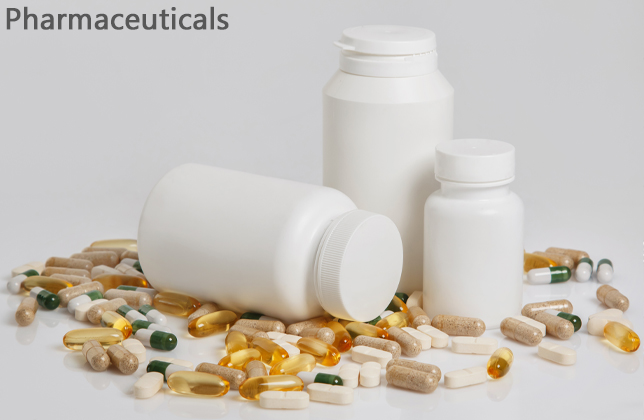
<style>
.page{position:relative;width:644px;height:420px}
.page>*{position:absolute;margin:0}
.t1{font:30px "Gadugi";color:#575757;font-weight:bold}
</style>
<div class="page">
<p class="t1" style="left:6px;top:6px;width:223px;height:24px">Pharmaceuticals</p>
</div>
